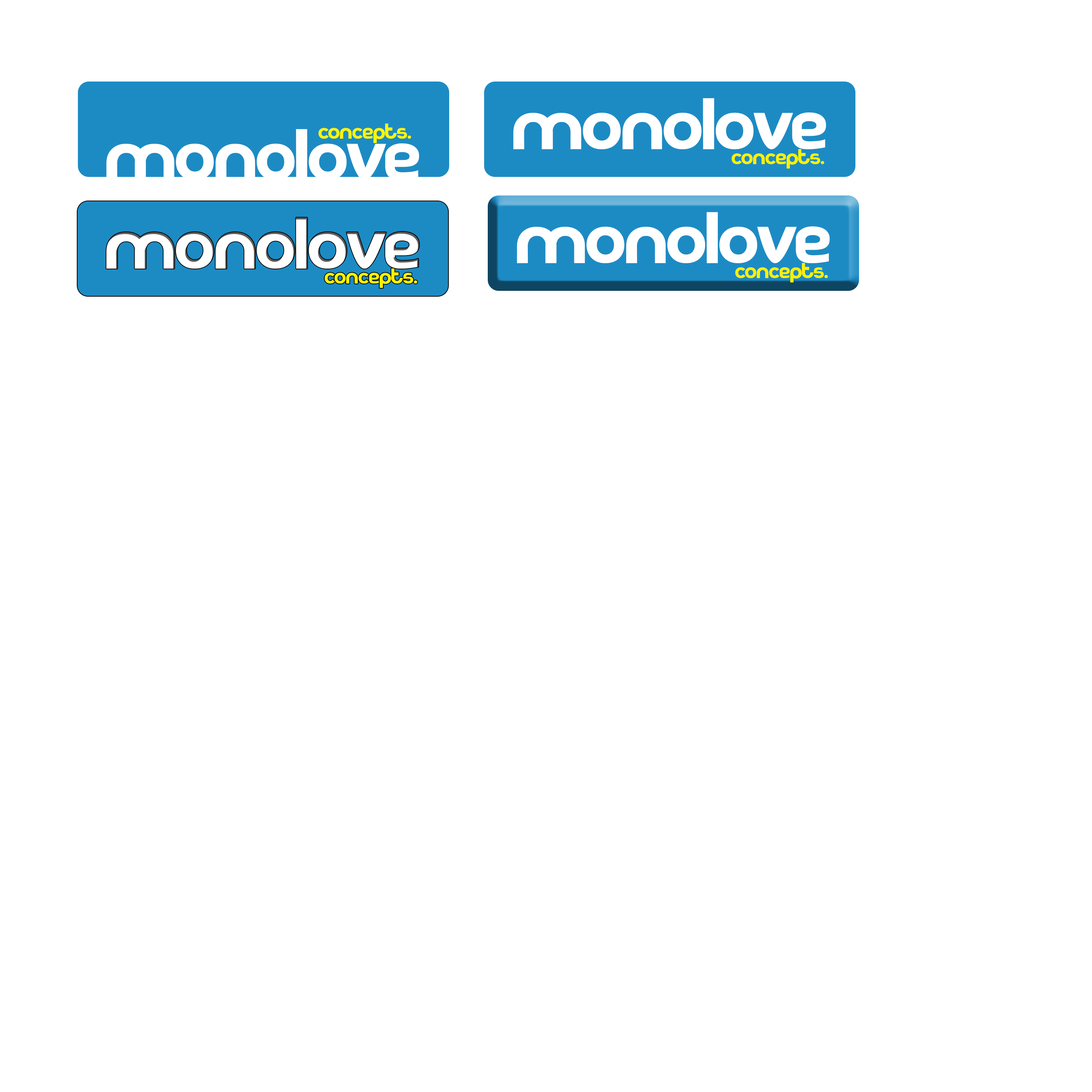
<style>
.page{position:relative;width:1092px;height:1092px;background:#ffffff}
.page>*{position:absolute;margin:0}
.t1{font:72.8px "kodakku";letter-spacing:-0.01em;color:#ffffff}
.t2{font:21.4px "kodakku";letter-spacing:-0.01em;color:#fff600}
.t3{font:21.4px "kodakku";letter-spacing:-0.01em;color:#fff000}
</style>
<div class="page">
<p class="t1" style="left:513px;top:98px;width:313px;height:51px">monolove</p>
<p class="t2" style="left:318px;top:123px;width:93px;height:20px">concepts.</p>
<p class="t1" style="left:106px;top:129px;width:313px;height:51px">monolove</p>
<p class="t3" style="left:732px;top:149px;width:92px;height:20px">concepts.</p>
<p class="t1" style="left:106px;top:217px;width:313px;height:52px">monolove</p>
<p class="t1" style="left:517px;top:212px;width:313px;height:51px">monolove</p>
<p class="t3" style="left:325px;top:268px;width:93px;height:20px">concepts.</p>
<p class="t3" style="left:735px;top:263px;width:93px;height:19px">concepts.</p>
</div>
